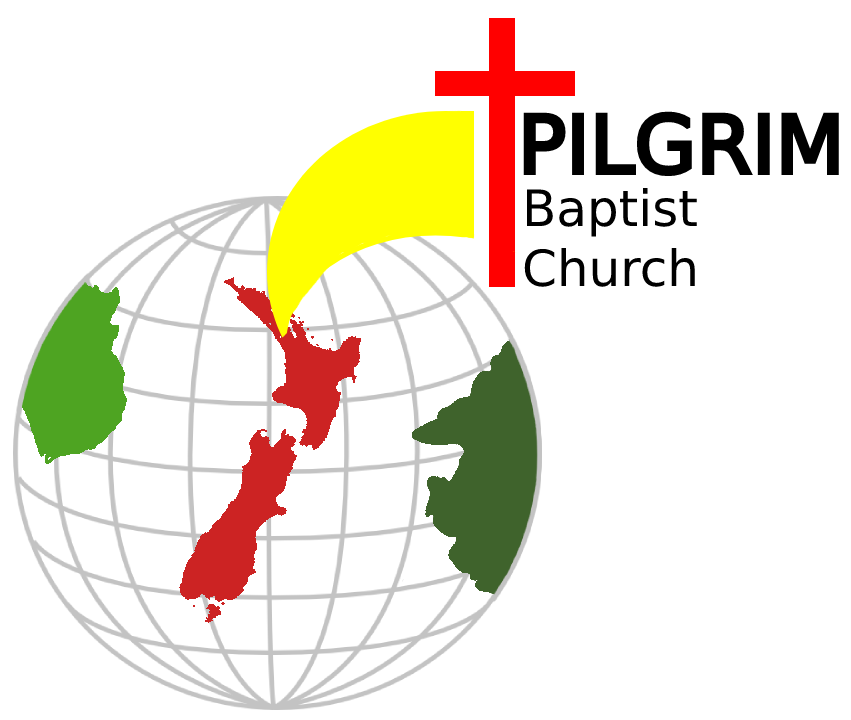
<style>
.page{position:relative;width:851px;height:720px;background:#ffffff}
.page>*{position:absolute;margin:0}
.t1{font:80px "DejaVuSans";color:#000000}
.t2{font:50px "DejaVuSans";color:#000000}
</style>
<div class="page">
<p class="t1" style="left:523px;top:111px;width:316px;height:66px">PILGRIM</p>
<p class="t2" style="left:524px;top:188px;width:173px;height:99px">Baptist<br>Church</p>
</div>
